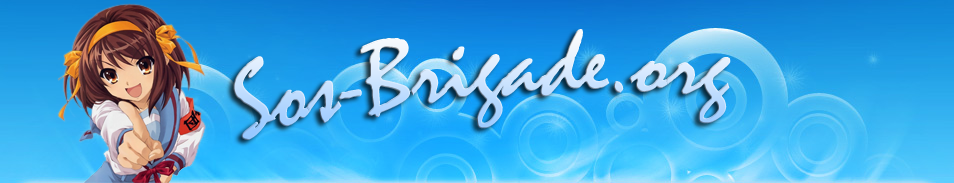
<style>
.page{position:relative;width:954px;height:183px}
.page>*{position:absolute;margin:0}
.t1{font:100px "Mistral"}
</style>
<div class="page">
<p class="t1" style="left:233px;top:29px;width:498px;height:111px;rotate:-4deg">Sos-Brigade.org</p>
</div>
